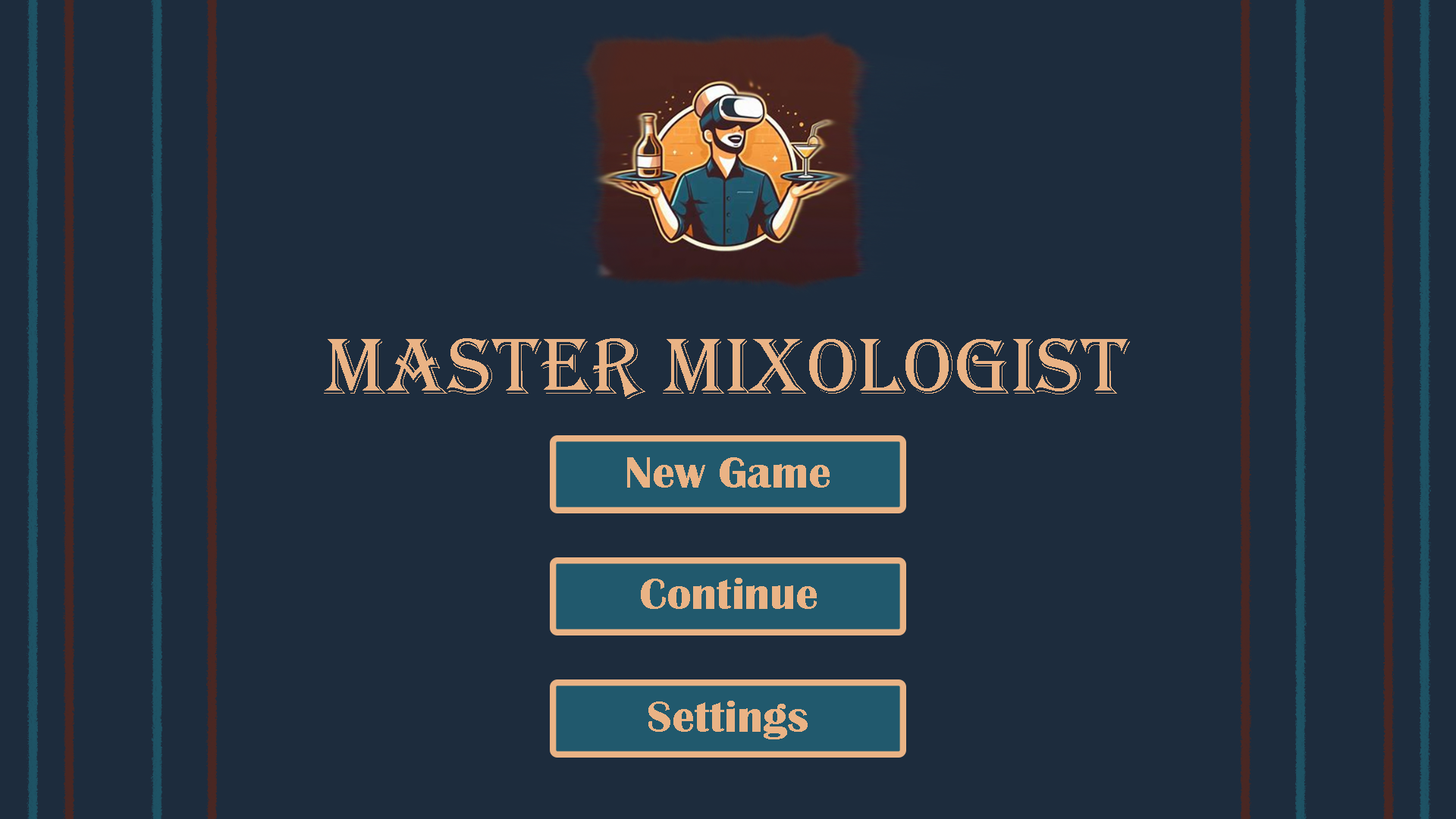
<style>
.page{position:relative;width:1456px;height:819px;background:#1d2c3d}
.page>*{position:absolute;margin:0}
.t1{font:82.2px "Algerian";color:#eab385}
.t2{font:45.5px "BritannicBold";color:#eab385}
</style>
<div class="page">
<p class="t1" style="left:324px;top:338px;width:806px;height:61px">Master Mixologist</p>
<p class="t2" style="left:627px;top:457px;width:203px;height:31px">New Game</p>
<p class="t2" style="left:641px;top:578px;width:176px;height:31px">Continue</p>
<p class="t2" style="left:648px;top:701px;width:160px;height:38px">Settings</p>
</div>
